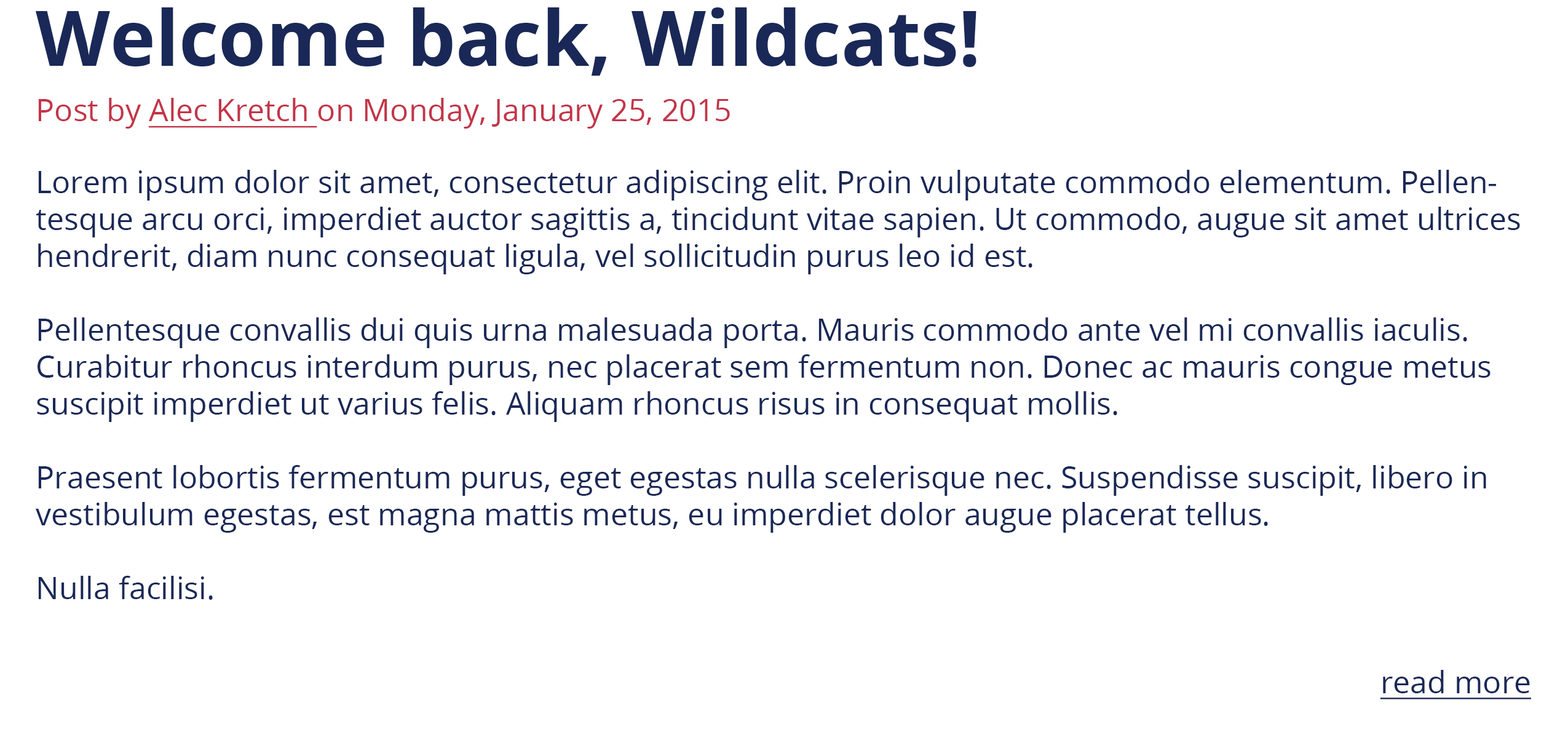
<style>
.page{position:relative;width:1568px;height:756px;background:#ffffff}
.page>*{position:absolute;margin:0}
.t1{font:76.9px "OpenSans-Bold";color:#192857}
.t2{font:30.7px "OpenSans";color:#c33448}
.t3{font:30.7px "OpenSans";color:#c33448;text-decoration:underline}
.t4{font:7.4px "OpenSans";color:#192857}
.t5{font:7.4px "OpenSans";color:#192857;text-decoration:underline}
</style>
<div class="page">
<p class="t1" style="left:36px;top:7px;width:940px;height:69px">Welcome back, Wildcats!</p>
<p class="t2" style="left:38px;top:98px;width:692px;height:31px">Post by <span class="t3">Alec Kretch </span>on Monday, January 25, 2015</p>
<p class="t4" style="left:36px;top:170px;width:1484px;height:430px">Lorem ipsum dolor sit amet, consectetur adipiscing elit. Proin vulputate commodo elementum. Pellentesque arcu orci, imperdiet auctor sagittis a, tincidunt vitae sapien. Ut commodo, augue sit amet ultrices hendrerit, diam nunc consequat ligula, vel sollicitudin purus leo id est.<br><br>Pellentesque convallis dui quis urna malesuada porta. Mauris commodo ante vel mi convallis iaculis. Curabitur rhoncus interdum purus, nec placerat sem fermentum non. Donec ac mauris congue metus suscipit imperdiet ut varius felis. Aliquam rhoncus risus in consequat mollis.<br><br>Praesent lobortis fermentum purus, eget egestas nulla scelerisque nec. Suspendisse suscipit, libero in vestibulum egestas, est magna mattis metus, eu imperdiet dolor augue placerat tellus.<br><br>Nulla facilisi.</p>
<p class="t5" style="left:1380px;top:670px;width:151px;height:29px;text-align:right">read more</p>
</div>
